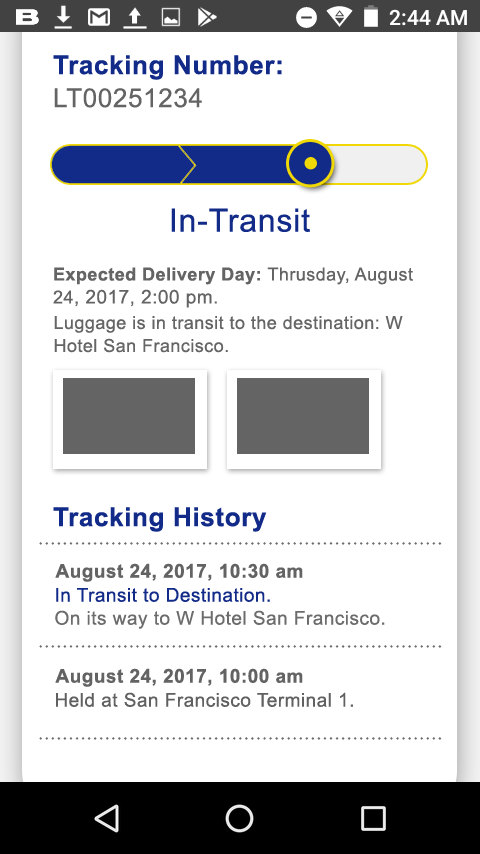
<style>
.page{position:relative;width:480px;height:854px;background:#ffffff}
.page>*{position:absolute;margin:0}
.t1{font:26px/33px "Arial-BoldMT";letter-spacing:0.025em;color:#122a88}
.t2{font:26px/33px "ArialMT";letter-spacing:0.025em;color:#646464}
.t3{font:32px "ArialMT";letter-spacing:0.025em;color:#122a88}
.t4{font:18px/23px "Arial-BoldMT";letter-spacing:0.025em;color:#646464}
.t5{font:18px/23px "ArialMT";letter-spacing:0.025em;color:#646464}
.t6{font:19px/23px "ArialMT";letter-spacing:0.025em;color:#646464}
.t7{font:18px/23px "ArialMT";letter-spacing:0.025em;color:#656565}
.t8{font:26px "Arial-BoldMT";letter-spacing:0.025em;color:#122a88}
.t9{font:19px "Arial-BoldMT";letter-spacing:0.025em;color:#636363}
.t10{font:19px/23px "ArialMT";letter-spacing:0.025em;color:#6c6c6c}
.t11{font:19px/23px "ArialMT";letter-spacing:0.025em;color:#122a88}
.t12{font:19px "ArialMT";letter-spacing:0.025em;color:#606060}
</style>
<div class="page">
<p class="t1" style="left:53px;top:55px;width:229px;height:53px">Tracking Number:<br><span class="t2">LT00251234</span></p>
<p class="t3" style="left:171px;top:208px;width:139px;height:24px">In-Transit</p>
<p class="t4" style="left:53px;top:267px;width:360px;height:41px">Expected Delivery Day: <span class="t5">Thrusday, August 24</span><span class="t6">, 2017, 2:00 pm.</span></p>
<p class="t7" style="left:54px;top:316px;width:349px;height:37px">Luggage is in transit to the destination: W Hotel San Francisco.</p>
<p class="t8" style="left:53px;top:507px;width:214px;height:25px">Tracking History</p>
<p class="t9" style="left:55px;top:563px;width:248px;height:19px">August 24, 2017, 10:30 am</p>
<p class="t10" style="left:55px;top:588px;width:330px;height:41px"><span class="t11">In Transit to Destination.<br></span>On its way to W Hotel San Francisco.</p>
<p class="t9" style="left:55px;top:668px;width:248px;height:19px">August 24, 2017, 10:00 am</p>
<p class="t12" style="left:56px;top:692px;width:297px;height:15px">Held at San Francisco Terminal 1.</p>
</div>
